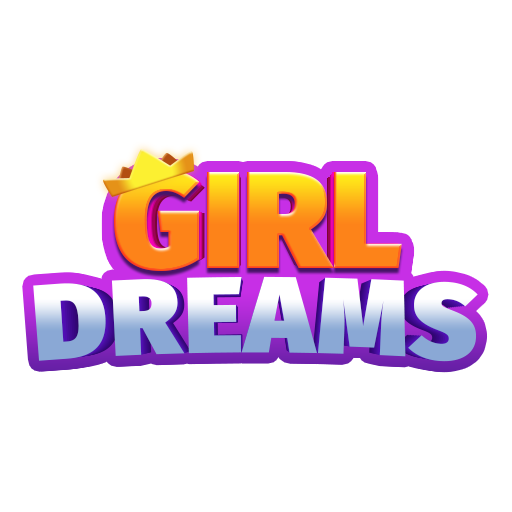
<style>
.page{position:relative;width:512px;height:512px;background:#ffffff}
.page>*{position:absolute;margin:0}
.t1{font:138.2px "FiraSans-Ultra"}
.t2{font:135.4px "FiraSans-Ultra"}
.t3{font:132.7px "FiraSans-Ultra"}
.t4{font:130.1px "FiraSans-Ultra"}
.t5{font:127.5px "FiraSans-Ultra"}
.t6{font:124.9px "FiraSans-Ultra"}
.t7{font:110.6px "FiraSans-Ultra";letter-spacing:0.025em}
.t8{font:109.5px "FiraSans-Ultra";letter-spacing:0.025em}
.t9{font:108.4px "FiraSans-Ultra";letter-spacing:0.025em}
.t10{font:107.3px "FiraSans-Ultra";letter-spacing:0.025em}
.t11{font:106.2px "FiraSans-Ultra";letter-spacing:0.025em}
.t12{font:105.1px "FiraSans-Ultra";letter-spacing:0.025em}
.t13{font:104.1px "FiraSans-Ultra";letter-spacing:0.025em}
.t14{font:103.1px "FiraSans-Ultra";letter-spacing:0.025em}
</style>
<div class="page">
<p class="t1" style="left:114px;top:169px;width:288px;height:102px">GIRL</p>
<p class="t2" style="left:117px;top:169px;width:282px;height:101px">GIRL</p>
<p class="t3" style="left:119px;top:171px;width:278px;height:99px">GIRL</p>
<p class="t4" style="left:121px;top:172px;width:273px;height:97px">GIRL</p>
<p class="t5" style="left:124px;top:175px;width:267px;height:94px">GIRL</p>
<p class="t6" style="left:127px;top:176px;width:262px;height:92px">GIRL</p>
<p class="t7" style="left:33px;top:276px;width:445px;height:86px">DREAMS</p>
<p class="t8" style="left:35px;top:277px;width:441px;height:84px">DREAMS</p>
<p class="t9" style="left:37px;top:277px;width:437px;height:84px">DREAMS</p>
<p class="t10" style="left:39px;top:278px;width:433px;height:83px">DREAMS</p>
<p class="t11" style="left:42px;top:278px;width:427px;height:82px">DREAMS</p>
<p class="t12" style="left:44px;top:279px;width:423px;height:81px">DREAMS</p>
<p class="t13" style="left:46px;top:279px;width:419px;height:81px">DREAMS</p>
<p class="t14" style="left:48px;top:280px;width:415px;height:79px">DREAMS</p>
</div>
